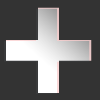
<style>
.page{position:relative;width:100px;height:100px;background:#333333}
.page>*{position:absolute;margin:0}
.t1{font:160.7px "Helvetica-Bold"}
</style>
<div class="page">
<p class="t1" style="left:6px;top:7px;width:86px;height:86px">+</p>
</div>
